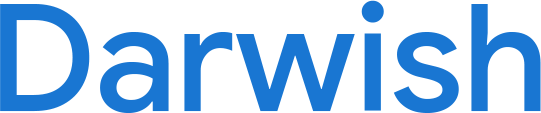
<style>
.page{position:relative;width:541px;height:113px;background:#ffffff}
.page>*{position:absolute;margin:0}
.t1{font:150px "GoogleSans-Medium";letter-spacing:-0.01em;color:#1976d2}
</style>
<div class="page">
<p class="t1" style="left:0px;top:0px;width:541px;height:113px">Darwish</p>
</div>
